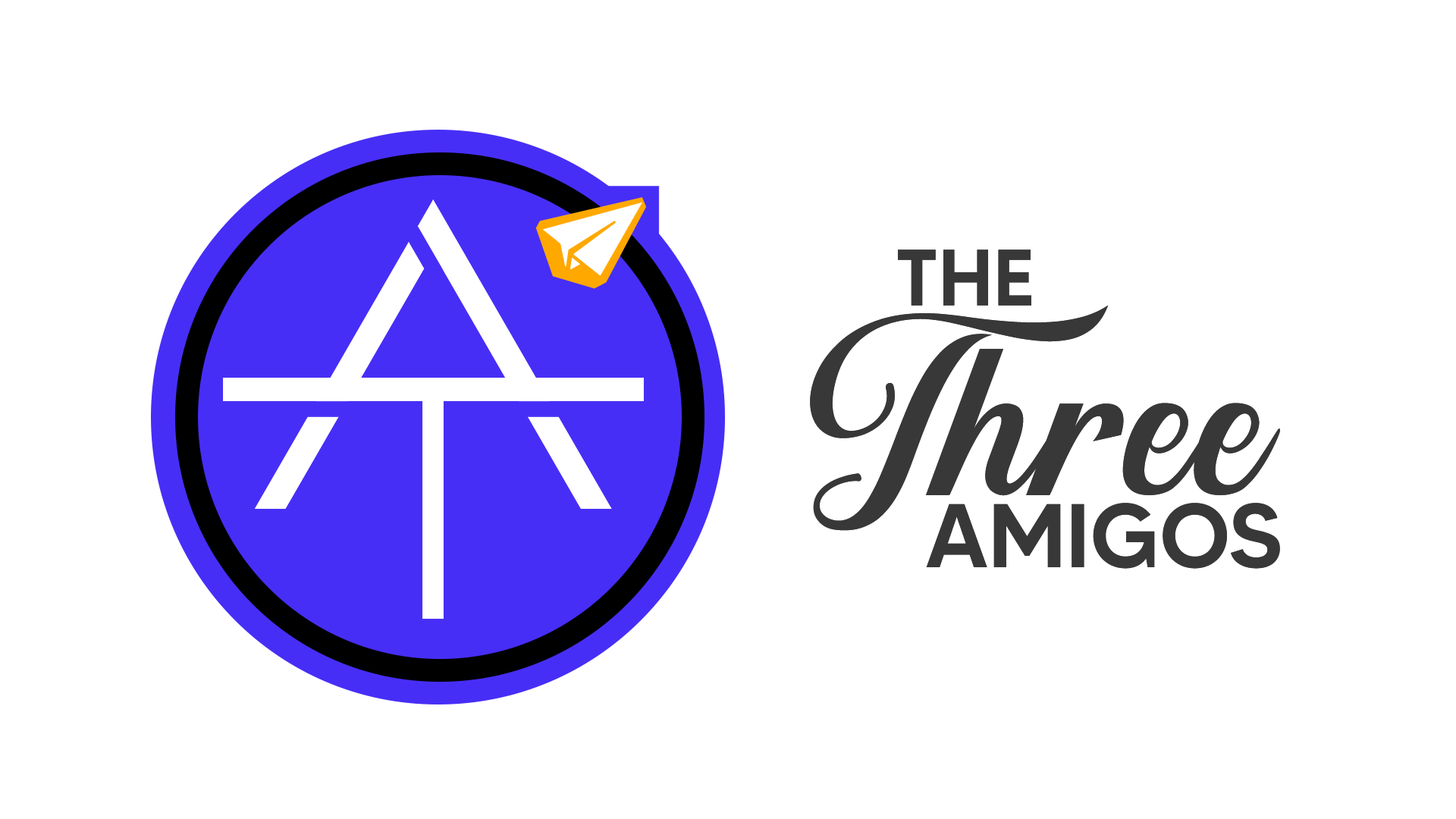
<style>
.page{position:relative;width:1456px;height:819px;background:#ffffff}
.page>*{position:absolute;margin:0}
.t1{font:79.4px "MADETOMMY-Medium";color:#383838;text-transform:uppercase}
.t2{font:254.2px "Sunshine";color:#383838}
.t3{font:89.9px "MADETOMMY-Medium";color:#383838;text-transform:uppercase}
</style>
<div class="page">
<p class="t1" style="left:898px;top:249px;width:133px;height:57px">The</p>
<p class="t1" style="left:898px;top:249px;width:133px;height:57px">The</p>
<p class="t2" style="left:810px;top:305px;width:470px;height:226px">Three</p>
<p class="t2" style="left:810px;top:305px;width:470px;height:226px">Three</p>
<p class="t3" style="left:926px;top:503px;width:354px;height:66px">Amigos</p>
<p class="t3" style="left:926px;top:503px;width:354px;height:66px">Amigos</p>
</div>
